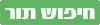
<style>
.page{position:relative;width:100px;height:25px;background:#5cb85c}
.page>*{position:absolute;margin:0}
.t1{font:21px "Agas";color:#ffffff}
</style>
<div class="page">
<p class="t1" style="left:4px;top:8px;width:91px;height:11px">חיפוש תור</p>
</div>
